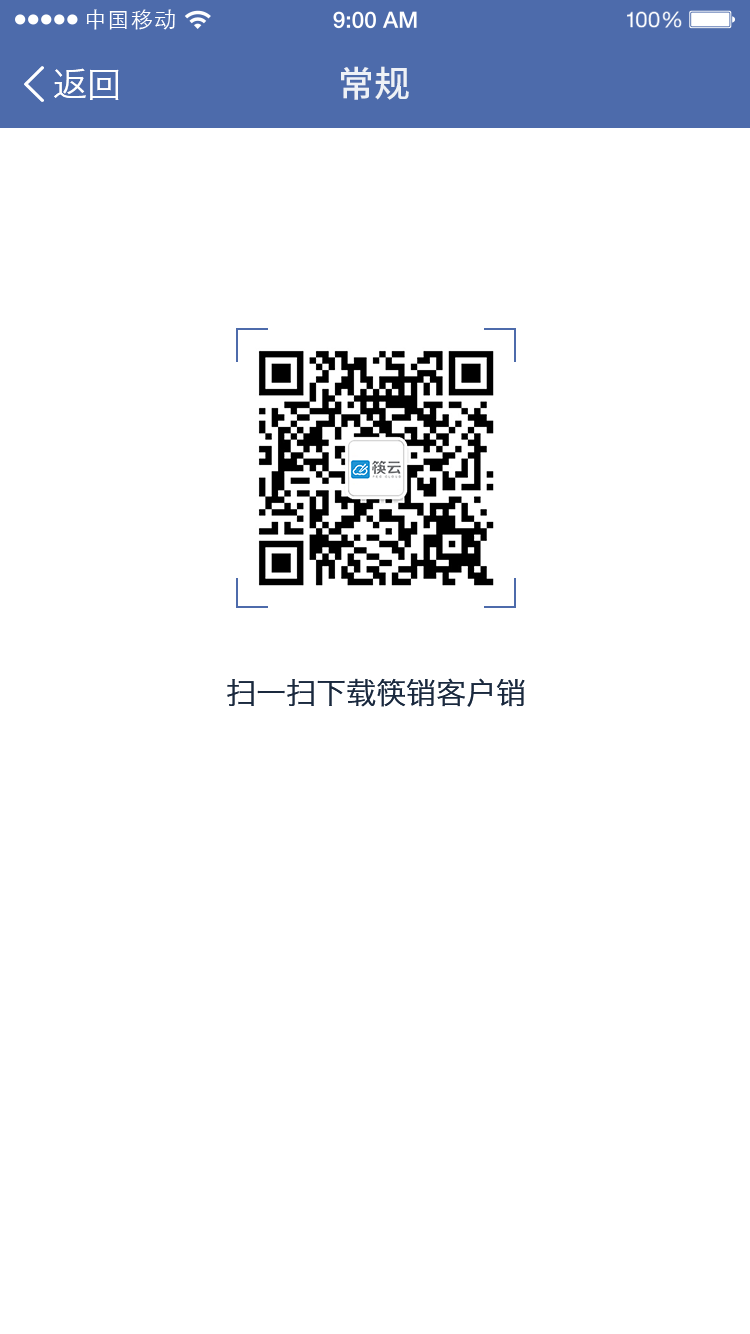
<style>
.page{position:relative;width:750px;height:1334px;background:#ffffff}
.page>*{position:absolute;margin:0}
.t1{font:21.9px "STXihei";letter-spacing:0.04em;color:#ffffff}
.t2{font:34px "HiraginoSansGB-W3";color:#ffffff}
.t3{font:36px "NotoSansHans-Medium";color:#eef1f6}
.t4{font:30px "HiraginoSansGB-W3";color:#1a293e}
</style>
<div class="page">
<p class="t1" style="left:86px;top:9px;width:89px;height:21px">中国移动</p>
<p class="t2" style="left:54px;top:68px;width:65px;height:32px">返回</p>
<p class="t3" style="left:341px;top:66px;width:68px;height:34px">常规</p>
<p class="t4" style="left:227px;top:678px;width:298px;height:29px">扫一扫下载筷销客户销</p>
</div>
